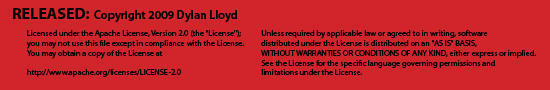
<style>
.page{position:relative;width:550px;height:90px;background:#d0252b}
.page>*{position:absolute;margin:0}
.t1{font:16px "MyriadPro-Bold";color:#010101}
.t2{font:12px "MyriadPro-Semibold";color:#010101}
.t3{font:8.2px "MyriadPro-Regular";color:#010101}
</style>
<div class="page">
<p class="t1" style="left:13px;top:8px;width:76px;height:11px">RELEASED:</p>
<p class="t2" style="left:94px;top:10px;width:143px;height:13px">Copyright 2009 Dylan Lloyd</p>
<p class="t3" style="left:26px;top:30px;width:218px;height:47px">Licensed under the Apache License, Version 2.0 (the "License");<br>you may not use this file except in compliance with the License.<br>You may obtain a copy of the License at<br><br>http://www.apache.org/licenses/LICENSE-2.0</p>
<p class="t3" style="left:261px;top:30px;width:275px;height:45px">Unless required by applicable law or agreed to in writing, software<br>   distributed under the License is distributed on an "AS IS" BASIS,<br>   WITHOUT WARRANTIES OR CONDITIONS OF ANY KIND, either express or implied.<br>   See the License for the specific language governing permissions and<br>   limitations under the License.</p>
</div>
